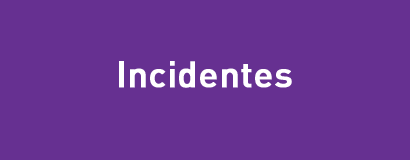
<style>
.page{position:relative;width:410px;height:160px;background:#663091}
.page>*{position:absolute;margin:0}
.t1{font:36px "DINPro-Medium";color:#ffffff;font-weight:bold}
</style>
<div class="page">
<p class="t1" style="left:119px;top:61px;width:173px;height:27px">Incidentes</p>
</div>
